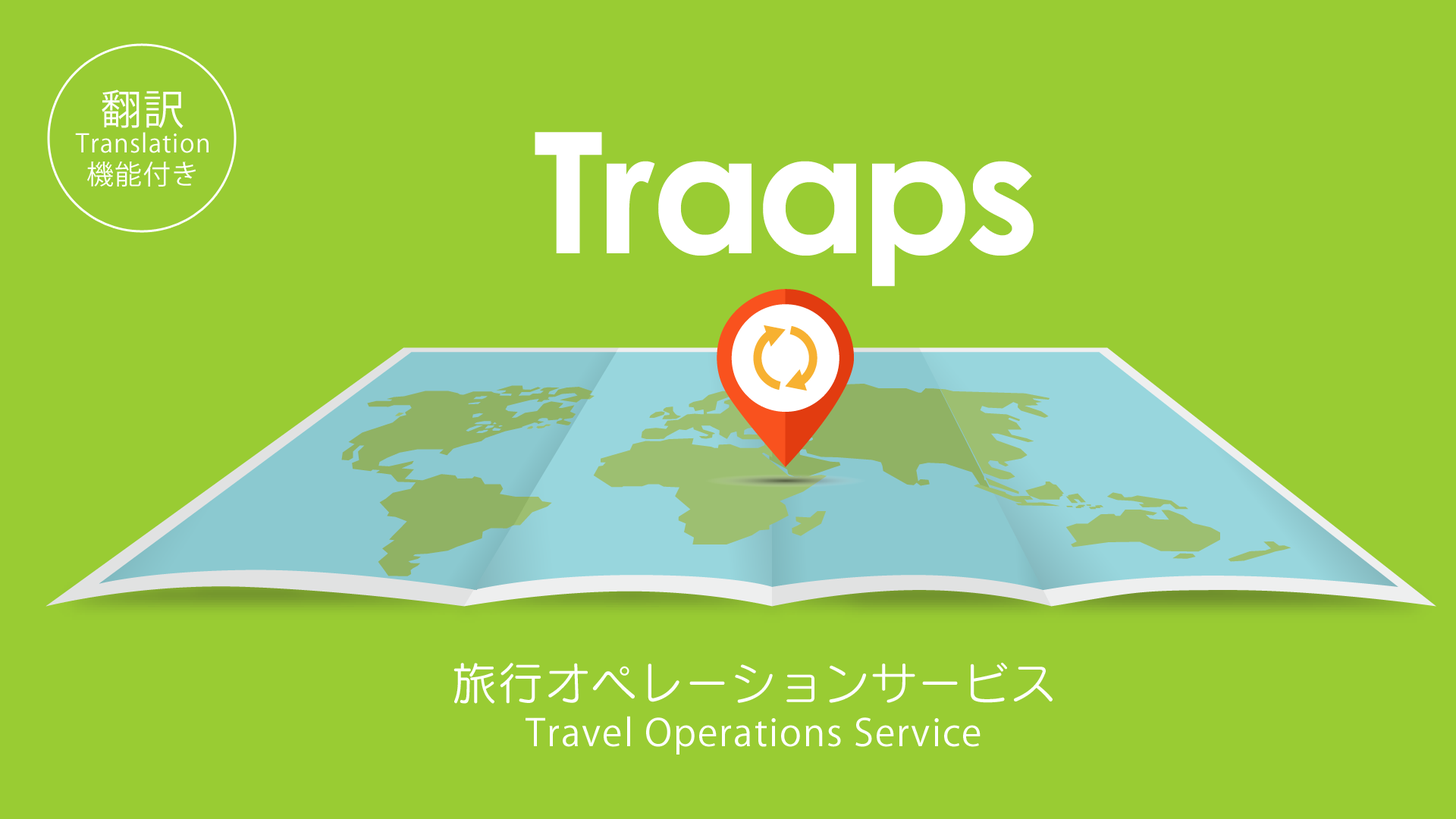
<style>
.page{position:relative;width:1456px;height:819px;background:#99cc33}
.page>*{position:absolute;margin:0}
.t1{font:27.2px/12.7px "KozGoPr6N-Regular";letter-spacing:0.04em;color:#ffffff}
.t2{font:40.9px/47.2px "KozGoPr6N-Regular";letter-spacing:0.04em;color:#ffffff}
.t3{font:25.1px "KozGoPr6N-Regular";letter-spacing:0.04em;color:#ffffff}
.t4{font:168.7px "CenturyGothic-Bold";letter-spacing:0.04em;color:#ffffff}
.t5{font:37.2px/46.2px "KozGoPr6N-Regular";letter-spacing:0.04em;color:#ffffff}
.t6{font:44.8px/53.8px "SeuratPro-M";letter-spacing:0.04em;color:#ffffff}
</style>
<div class="page">
<p class="t1" style="left:87px;top:89px;width:109px;height:98px;text-align:center"><span class="t2">翻訳<br><br></span>機能付き</p>
<p class="t3" style="left:75px;top:132px;width:134px;height:21px">Translation</p>
<p class="t4" style="left:535px;top:132px;width:499px;height:155px">Traaps</p>
<p class="t5" style="left:453px;top:662px;width:600px;height:93px;text-align:center"><span class="t6">旅行オペレーションサービス<br></span>Travel Operations Service</p>
</div>
